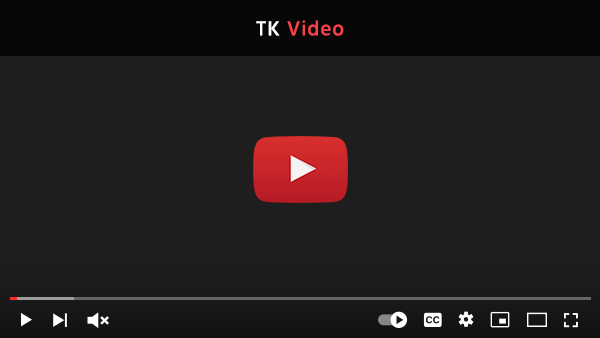
<style>
.page{position:relative;width:600px;height:338px;background:#1e1e1e}
.page>*{position:absolute;margin:0}
.t1{font:20.8px "Hind-Medium";letter-spacing:0.05em;color:#fa4149}
.t2{font:20.8px "Hind-Medium";letter-spacing:0.05em;color:#fefbfb}
</style>
<div class="page">
<p class="t1" style="left:256px;top:20px;width:88px;height:16px"><span class="t2">TK </span>Video</p>
</div>
